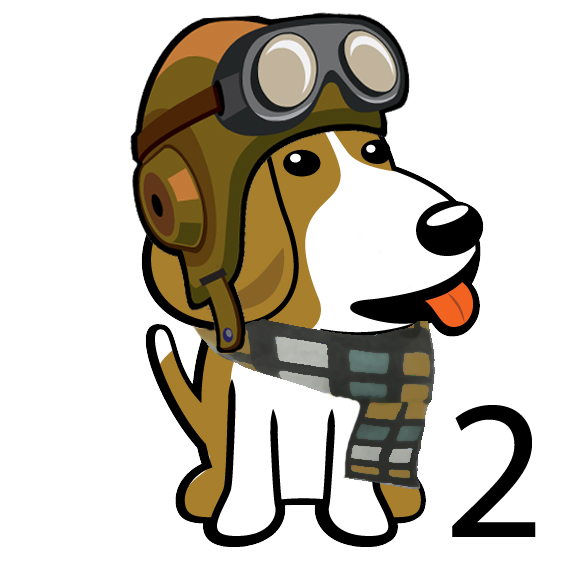
<style>
.page{position:relative;width:566px;height:566px;background:#ffffff}
.page>*{position:absolute;margin:0}
.t1{font:200px "MyriadPro-Regular";color:#000000}
</style>
<div class="page">
<p class="t1" style="left:452px;top:405px;width:84px;height:132px">2</p>
</div>
